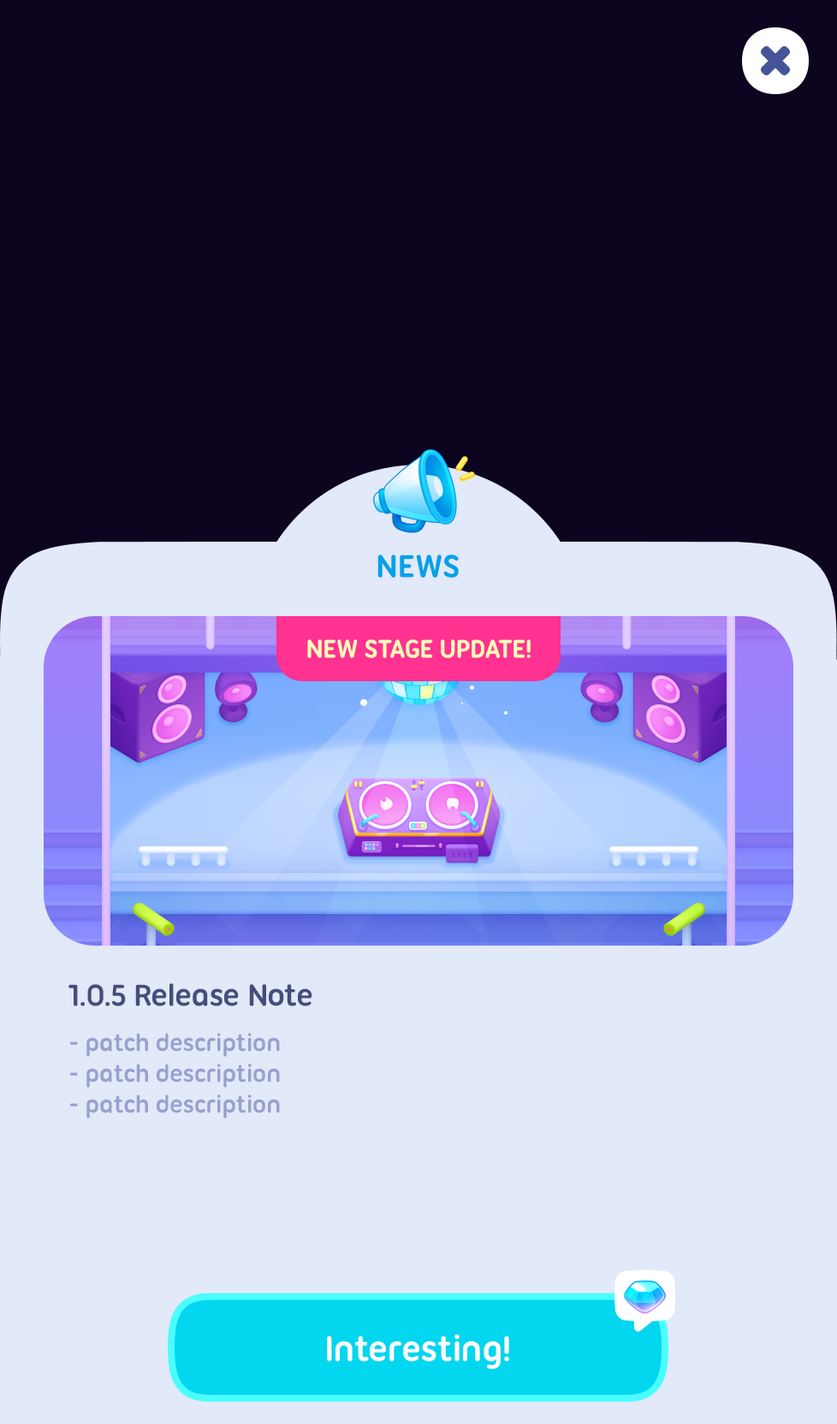
<style>
.page{position:relative;width:837px;height:1424px;background:#0d0420}
.page>*{position:absolute;margin:0}
.t1{font:34.2px "UbuntuTitling-Bold";letter-spacing:-0.025em;color:#01a2e8;text-transform:uppercase}
.t2{font:27.4px "UbuntuTitling-Bold";letter-spacing:-0.025em;color:#fefbb7;text-transform:uppercase}
.t3{font:32.5px "UbuntuTitling-Bold";letter-spacing:-0.025em;color:#454e7b}
.t4{font:25.7px/30.8px "UbuntuTitling-Bold";letter-spacing:-0.025em;color:#98a1ce}
.t5{font:37.7px "UbuntuTitling-Bold";letter-spacing:-0.025em;color:#ffffff}
</style>
<div class="page">
<p class="t1" style="left:377px;top:555px;width:82px;height:23px">News</p>
<p class="t2" style="left:307px;top:639px;width:224px;height:19px">New Stage Update!</p>
<p class="t3" style="left:68px;top:984px;width:244px;height:23px">1.0.5 Release Note</p>
<p class="t4" style="left:70px;top:1033px;width:210px;height:86px">- patch description<br>- patch description<br>- patch description</p>
<p class="t5" style="left:327px;top:1334px;width:182px;height:36px">Interesting!</p>
</div>
